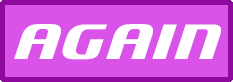
<style>
.page{position:relative;width:233px;height:82px;background:#d953e9}
.page>*{position:absolute;margin:0}
.t1{font:56.4px "Motorwerk";color:#ffffff}
</style>
<div class="page">
<p class="t1" style="left:14px;top:24px;width:207px;height:36px">Again</p>
</div>
